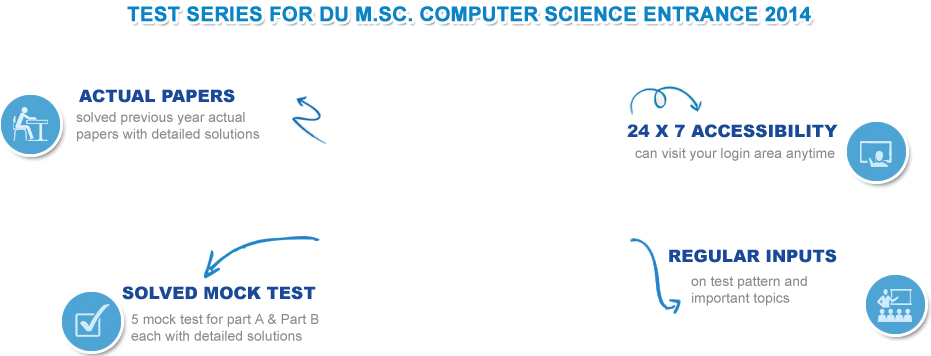
<style>
.page{position:relative;width:931px;height:356px;background:#ffffff}
.page>*{position:absolute;margin:0}
.t1{font:20px "Arial-BoldMT";color:#0b84c6;font-weight:bold}
.t2{font:17px "Arial-Black";color:#1a4997}
.t3{font:14px "ArialMT";color:#8a8a8a}
</style>
<div class="page">
<p class="t1" style="left:127px;top:6px;width:684px;height:16px">TEST SERIES FOR DU M.SC. COMPUTER SCIENCE ENTRANCE 2014</p>
<p class="t2" style="left:79px;top:89px;width:156px;height:14px">ACTUAL PAPERS</p>
<p class="t3" style="left:76px;top:112px;width:184px;height:30px">solved previous year actual <br>papers with detailed solutions</p>
<p class="t2" style="left:627px;top:124px;width:211px;height:14px">24 X 7 ACCESSIBILITY</p>
<p class="t3" style="left:635px;top:148px;width:200px;height:13px">can visit your login area anytime</p>
<p class="t2" style="left:669px;top:249px;width:168px;height:14px">REGULAR INPUTS</p>
<p class="t3" style="left:691px;top:276px;width:116px;height:30px">on test pattern and <br>important topics</p>
<p class="t2" style="left:122px;top:286px;width:194px;height:14px">SOLVED MOCK TEST</p>
<p class="t3" style="left:131px;top:314px;width:188px;height:27px">5 mock test for part A &amp; Part B <br>each with detailed solutions</p>
</div>
